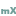
<style>
.page{position:relative;width:16px;height:16px;background:#ffffff}
.page>*{position:absolute;margin:0}
.t1{font:9px "Arial-Black";color:#719f9a}
</style>
<div class="page">
<p class="t1" style="left:1px;top:7px;width:16px;height:7px">mX</p>
</div>
